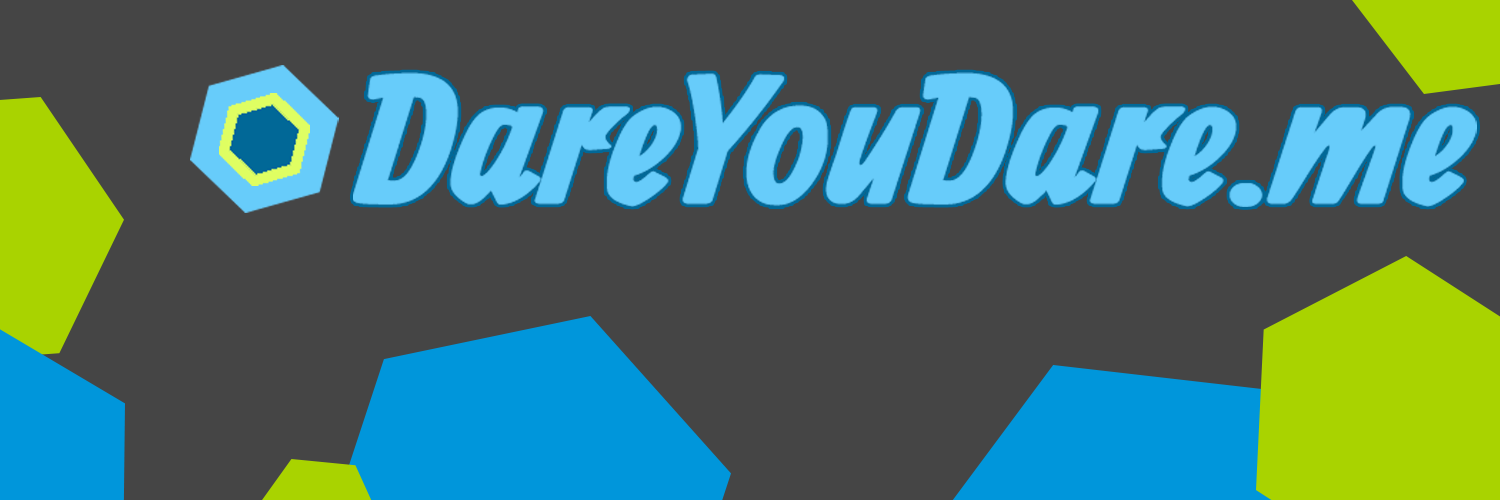
<style>
.page{position:relative;width:1500px;height:500px;background:#454545}
.page>*{position:absolute;margin:0}
.t1{font:182.2px "Allan-Bold";color:#67ccfa;scale:1.21 1}
</style>
<div class="page">
<p class="t1" style="left:353px;top:72px;width:1124px;height:135px">DareYouDare.me</p>
</div>
